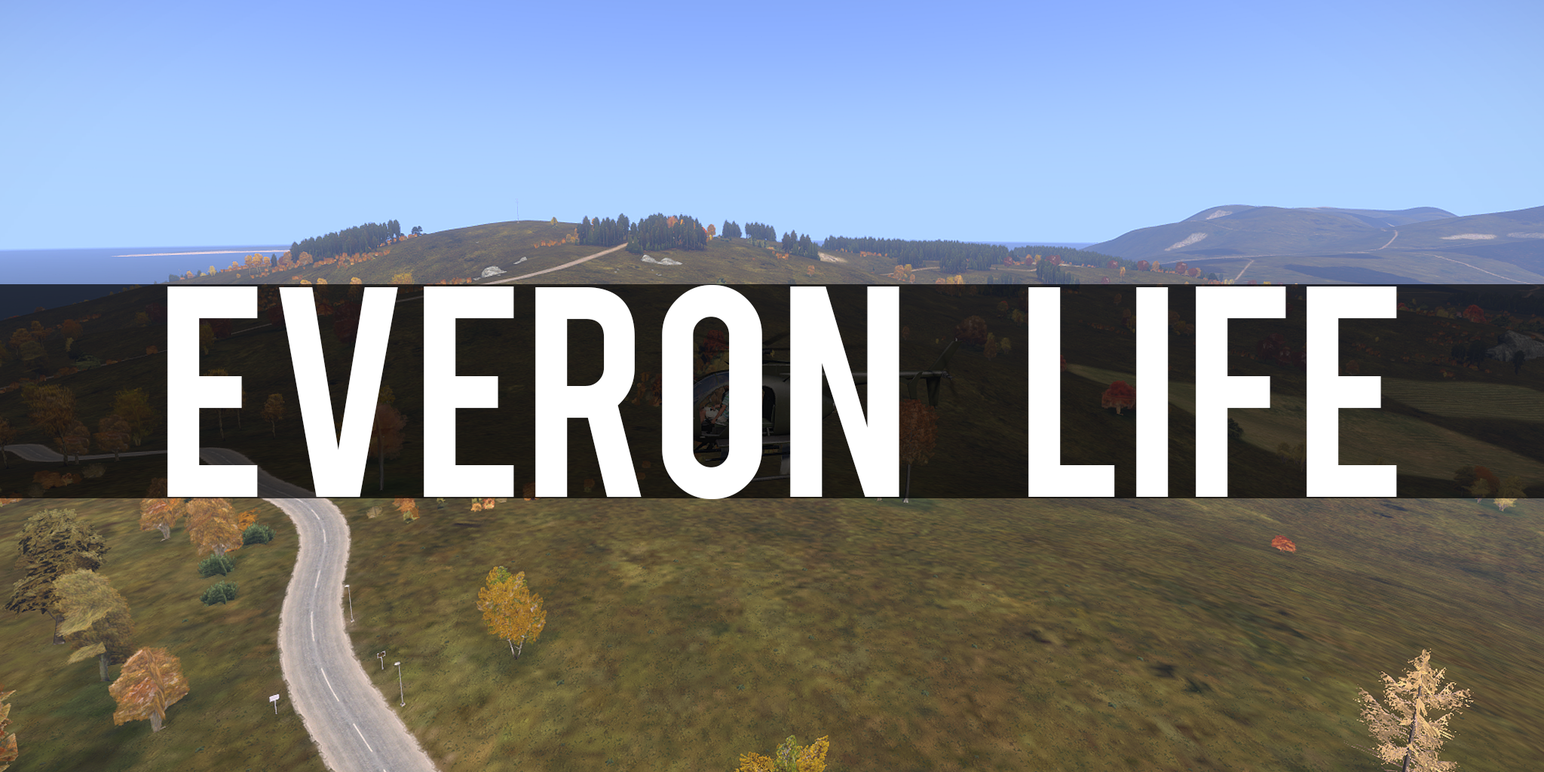
<style>
.page{position:relative;width:1544px;height:772px}
.page>*{position:absolute;margin:0}
.t1{font:235px "Bebas";color:#ffffff}
</style>
<div class="page">
<p class="t1" style="left:167px;top:285px;width:1230px;height:214px">Everon     Life</p>
</div>
